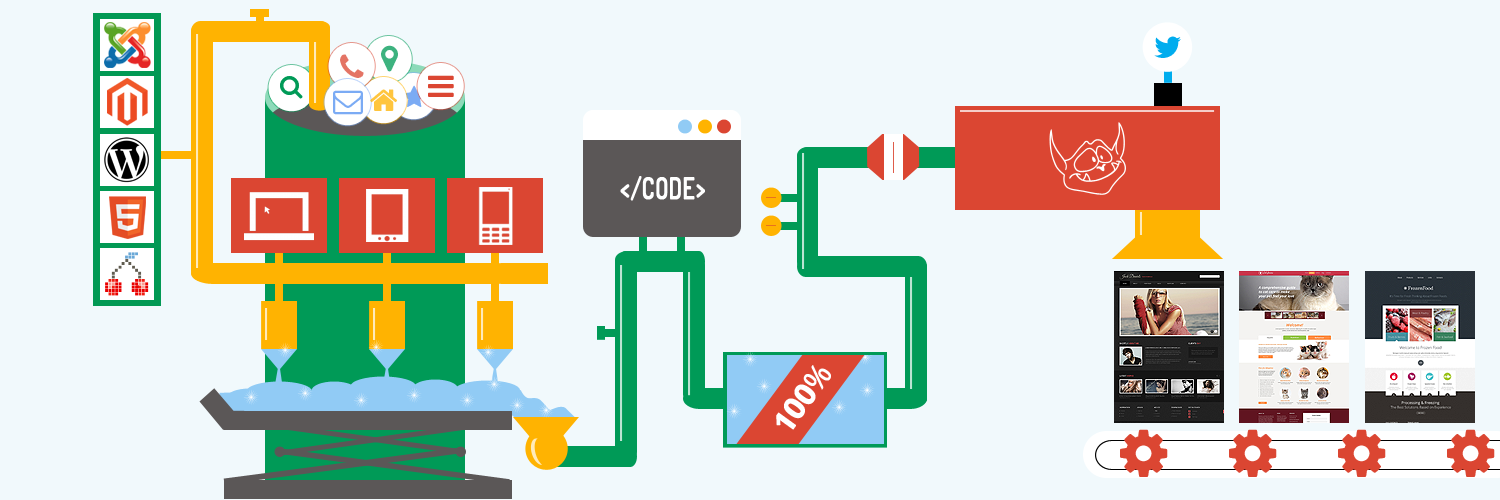
<style>
.page{position:relative;width:1500px;height:500px;background:#f1f9fc}
.page>*{position:absolute;margin:0}
.t1{font:30px "Dosis-SemiBold";color:#ffffff;font-weight:bold;scale:0.77 1}
.t2{font:30px "OpenSans-Bold";letter-spacing:-0.025em;color:#ffffff;font-weight:bold}
.t3{font:30px "OpenSans";letter-spacing:-0.025em;color:#ffffff;font-weight:bold}
</style>
<div class="page">
<p class="t1" style="left:620px;top:176px;width:85px;height:25px">&lt;/CODE&gt;</p>
<p class="t2" style="left:776px;top:365px;width:55px;height:65px;rotate:-54deg">100<span class="t3">%</span></p>
</div>
